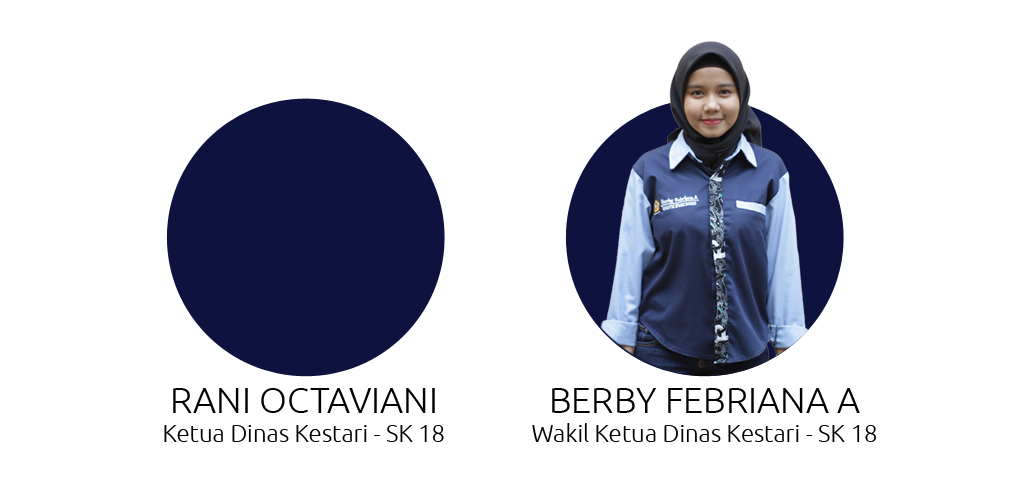
<style>
.page{position:relative;width:1024px;height:500px;background:#ffffff}
.page>*{position:absolute;margin:0}
.t1{font:24px "Ubuntu-Light";color:#000000}
.t2{font:36px "Ubuntu-Light";color:#000000}
</style>
<div class="page">
<p class="t1" style="left:164px;top:388px;width:280px;height:54px;text-align:center"><span class="t2">RANI OCTAVIANI<br></span>Ketua Dinas Kestari - SK 18</p>
<p class="t1" style="left:532px;top:388px;width:344px;height:54px;text-align:center"><span class="t2">BERBY FEBRIANA A<br></span>Wakil Ketua Dinas Kestari - SK 18</p>
</div>
